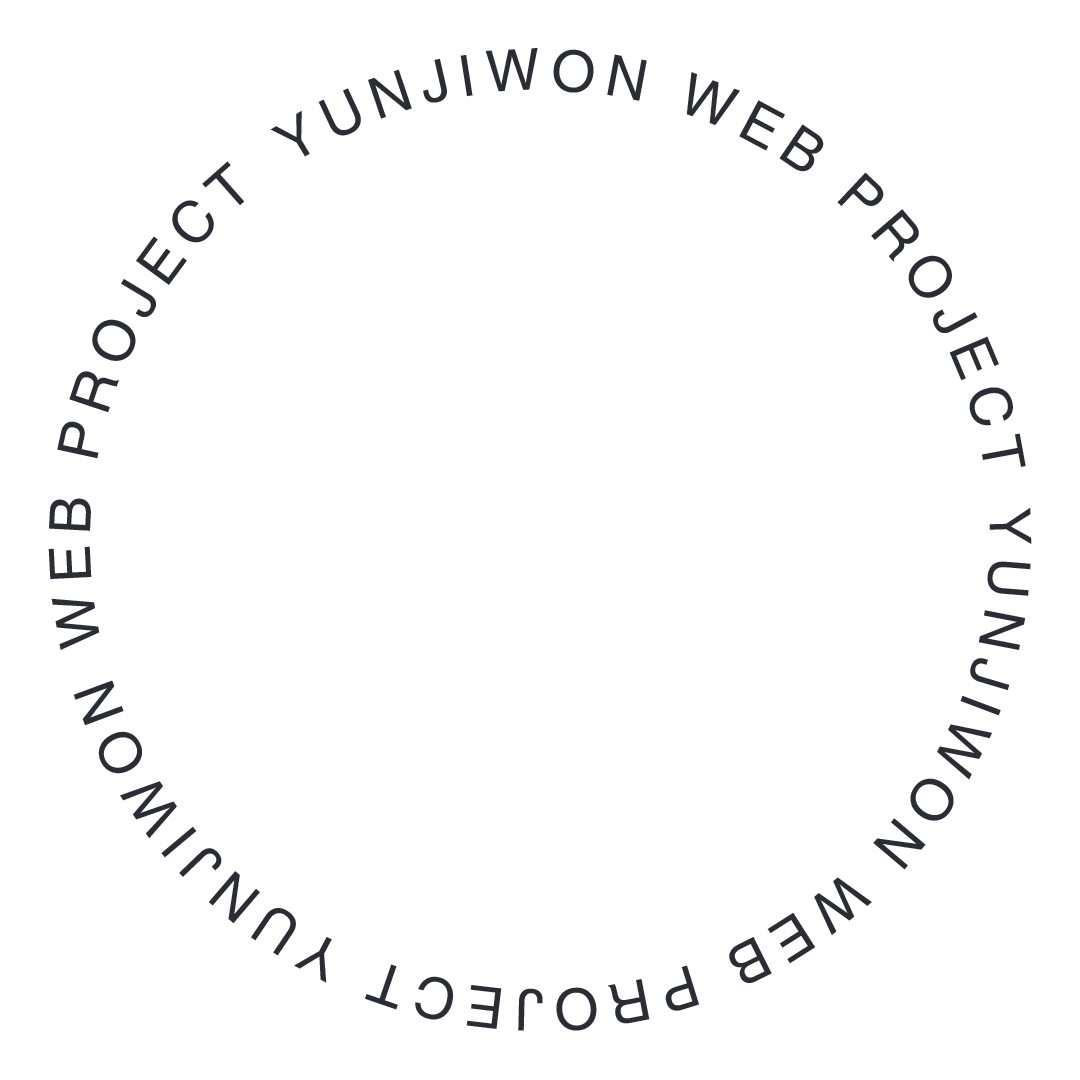
<style>
.page{position:relative;width:1080px;height:1080px;background:#ffffff}
.page>*{position:absolute;margin:0}
.t1{font:57px/20px "Helvetica";letter-spacing:0.16em;color:#2a2e34}
.t2{font:58px/20px "Helvetica";letter-spacing:0.16em;color:#2a2e34}
</style>
<div class="page">
<p class="t1" style="left:48px;top:48px;width:984px;height:983px">YUNJIWON WEB PROJECT YUNJIWON WEB PROJECT YUNJIWON WEB PROJECT <span class="t2">PPROJECT</span></p>
</div>
